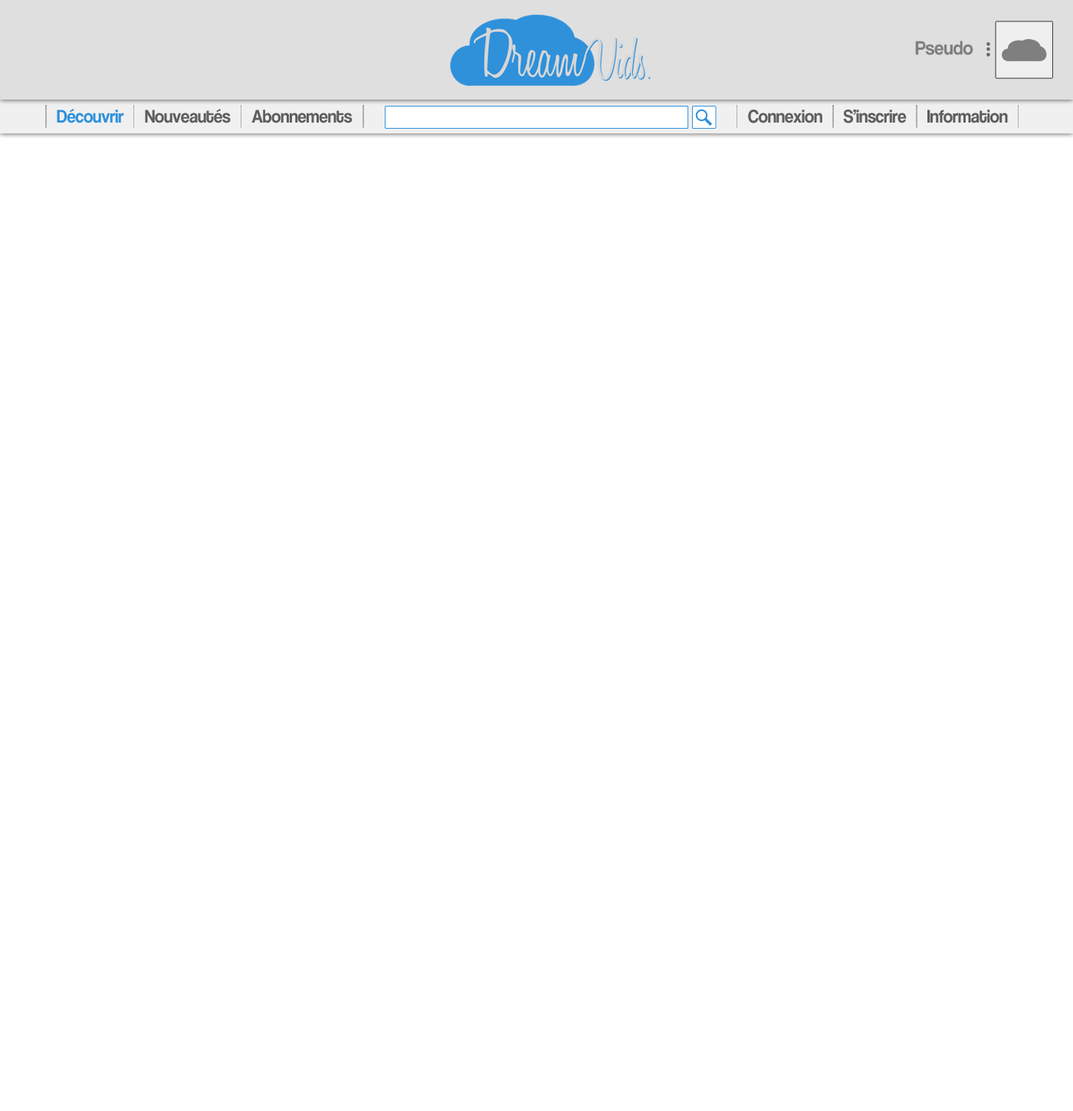
<style>
.page{position:relative;width:1073px;height:1111px;background:#ffffff}
.page>*{position:absolute;margin:0}
.t1{font:20.1px "CoolveticaRg-Regular";letter-spacing:-0.005em;color:#7f7f7f;scale:0.95 1}
.t2{font:19px "CoolveticaRg-Regular";letter-spacing:-0.005em;color:#3091db;scale:0.91 1}
.t3{font:19px "CoolveticaRg-Regular";letter-spacing:-0.005em;color:#5e5e5e;scale:0.91 1}
</style>
<div class="page">
<p class="t1" style="left:915px;top:41px;width:58px;height:14px">Pseudo</p>
<p class="t2" style="left:57px;top:109px;width:67px;height:14px">Découvrir</p>
<p class="t3" style="left:145px;top:109px;width:86px;height:14px">Nouveautés</p>
<p class="t3" style="left:251px;top:110px;width:102px;height:13px">Abonnements</p>
<p class="t3" style="left:748px;top:110px;width:74px;height:13px">Connexion</p>
<p class="t3" style="left:843px;top:110px;width:64px;height:13px">S’inscrire</p>
<p class="t3" style="left:927px;top:110px;width:81px;height:13px">Information</p>
</div>
